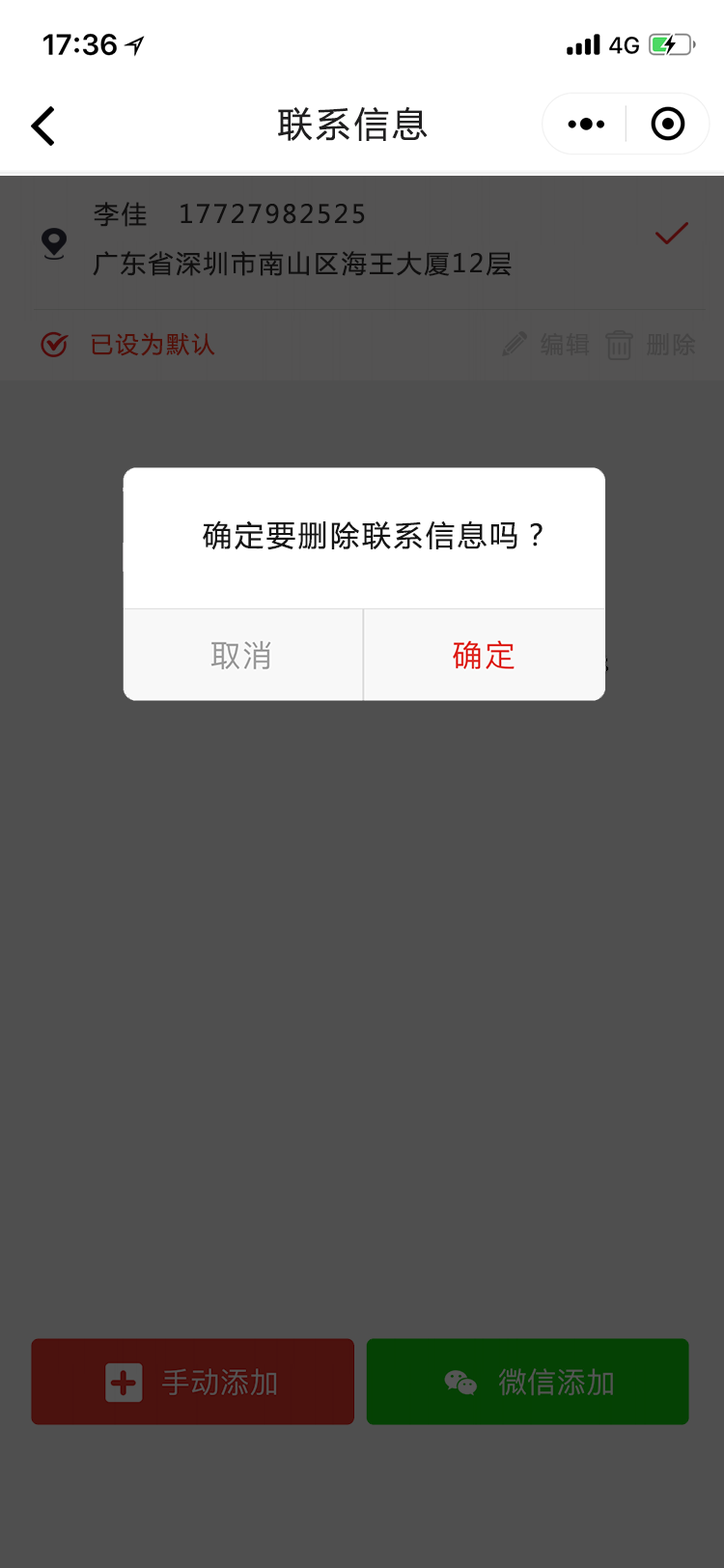
<style>
.page{position:relative;width:724px;height:1568px;background:#4f4f4f}
.page>*{position:absolute;margin:0}
.t1{font:34.8px "MicrosoftYaHei";letter-spacing:0.1em;color:#201f20}
.t2{font:25.1px "MicrosoftYaHei";letter-spacing:0.1em;color:#282727}
.t3{font:23.2px "MicrosoftYaHei";letter-spacing:0.1em;color:#521007}
.t4{font:23.2px "MicrosoftYaHei";letter-spacing:0.1em;color:#454444}
.t5{font:29px "MicrosoftYaHei";letter-spacing:0.1em;color:#151515}
</style>
<div class="page">
<p class="t1" style="left:278px;top:106px;width:150px;height:35px">联系信息</p>
<p class="t2" style="left:94px;top:202px;width:271px;height:25px">李佳   17727982525</p>
<p class="t2" style="left:93px;top:251px;width:419px;height:25px">广东省深圳市南山区海王大厦12层</p>
<p class="t3" style="left:91px;top:332px;width:124px;height:24px">已设为默认</p>
<p class="t4" style="left:541px;top:332px;width:49px;height:24px">编辑</p>
<p class="t4" style="left:647px;top:333px;width:49px;height:23px">删除</p>
<p class="t5" style="left:203px;top:520px;width:340px;height:30px">确定要删除联系信息吗？</p>
</div>
